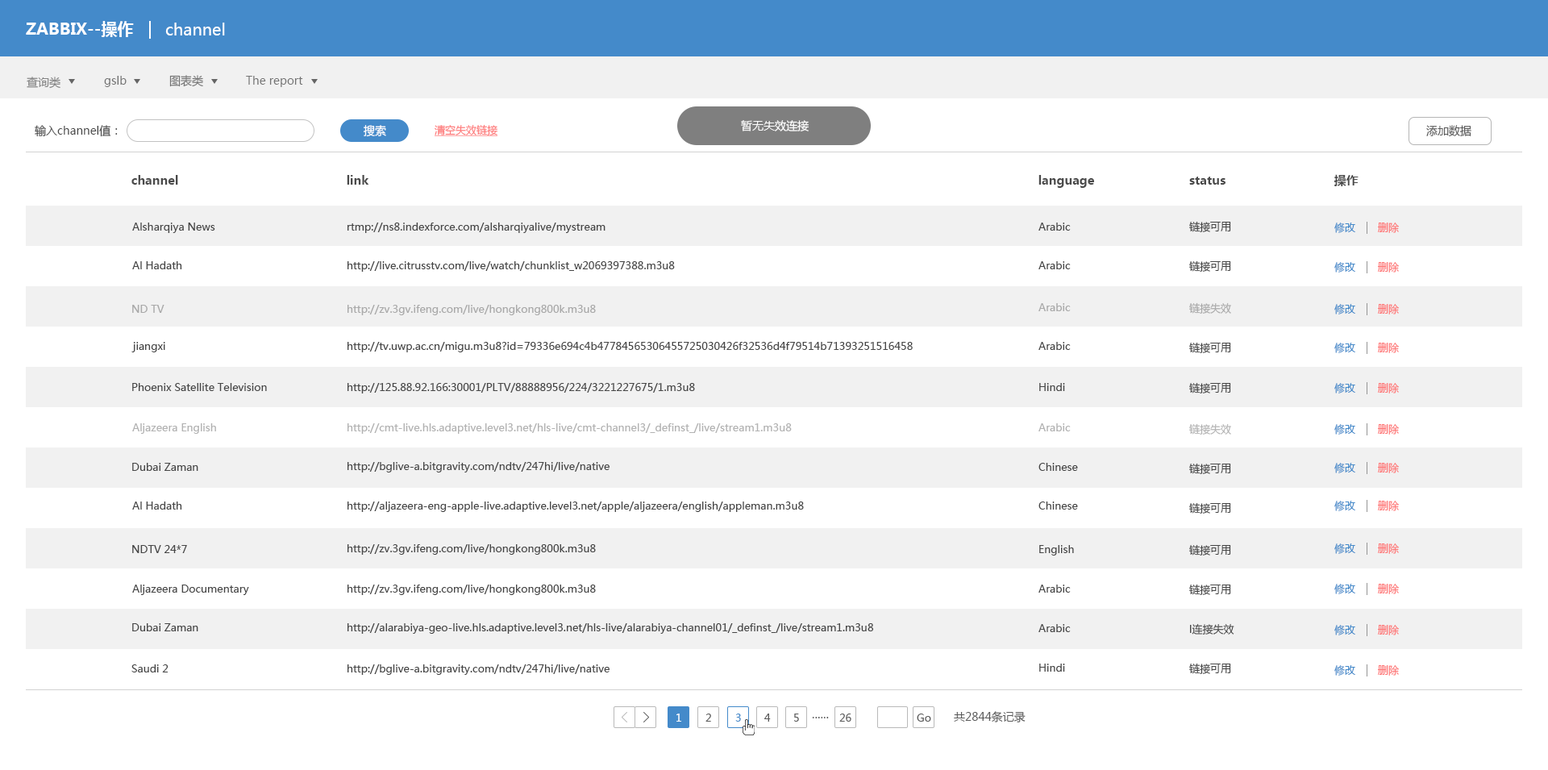
<style>
.page{position:relative;width:1548px;height:770px;background:#ffffff}
.page>*{position:absolute;margin:0}
.t1{font:16.1px "MicrosoftYaHei-Bold";color:#ffffff}
.t2{font:16.1px "MicrosoftYaHei";color:#ffffff}
.t3{font:11.3px "MicrosoftYaHei";color:#828282}
.t4{font:11.3px "MicrosoftYaHei";color:#747474}
.t5{font:11.3px "MicrosoftYaHei";color:#4a4a4a}
.t6{font:11.3px "MicrosoftYaHei";color:#ffffff}
.t7{font:10.5px "MicrosoftYaHei";color:#fe7878;text-decoration:underline}
.t8{font:11.3px "MicrosoftYaHei";color:#5c5c5c}
.t9{font:12.1px "MicrosoftYaHei-Bold";color:#4a4a4a}
.t10{font:10.5px "MicrosoftYaHei";color:#464646}
.t11{font:10.5px "MicrosoftYaHei";color:#448aca}
.t12{font:10.5px "MicrosoftYaHei";color:#fe7878}
.t13{font:10.5px "MicrosoftYaHei";color:#a9a9a9}
.t14{font:10.5px "MicrosoftYaHei";color:#b2b2b2}
.t15{font:10.5px "MicrosoftYaHei";color:#b3b3b3}
.t16{font:10.5px "MicrosoftYaHei";color:#ffffff}
.t17{font:10.5px "MicrosoftYaHei";color:#5b5b5b}
.t18{font:11.3px "MicrosoftYaHei";color:#5b5b5b}
</style>
<div class="page">
<p class="t1" style="left:26px;top:21px;width:108px;height:16px">ZABBIX--操作</p>
<p class="t2" style="left:165px;top:23px;width:60px;height:12px">channel</p>
<p class="t3" style="left:27px;top:77px;width:33px;height:12px">查询类</p>
<p class="t4" style="left:104px;top:76px;width:23px;height:11px">gslb</p>
<p class="t4" style="left:169px;top:75px;width:34px;height:12px">图表类</p>
<p class="t4" style="left:246px;top:76px;width:57px;height:11px">The report</p>
<p class="t5" style="left:35px;top:125px;width:83px;height:12px">输入channel值：</p>
<p class="t6" style="left:364px;top:125px;width:22px;height:12px">搜索</p>
<p class="t7" style="left:435px;top:124px;width:63px;height:12px">清空失效链接</p>
<p class="t6" style="left:741px;top:120px;width:68px;height:11px">暂无失效连接</p>
<p class="t8" style="left:1427px;top:125px;width:45px;height:12px">添加数据</p>
<p class="t9" style="left:131px;top:175px;width:47px;height:10px">channel</p>
<p class="t9" style="left:347px;top:175px;width:22px;height:10px">link</p>
<p class="t9" style="left:1039px;top:175px;width:55px;height:13px">language</p>
<p class="t9" style="left:1189px;top:177px;width:37px;height:8px">status</p>
<p class="t9" style="left:1335px;top:174px;width:24px;height:12px">操作</p>
<p class="t10" style="left:1189px;top:221px;width:42px;height:11px">链接可用</p>
<p class="t10" style="left:132px;top:223px;width:83px;height:10px">Alsharqiya News</p>
<p class="t10" style="left:348px;top:223px;width:258px;height:10px">rtmp://ns8.indexforce.com/alsharqiyalive/mystream</p>
<p class="t10" style="left:1039px;top:223px;width:32px;height:8px">Arabic</p>
<p class="t11" style="left:1335px;top:223px;width:21px;height:10px">修改</p>
<p class="t12" style="left:1378px;top:223px;width:21px;height:10px">删除</p>
<p class="t10" style="left:132px;top:261px;width:50px;height:8px">Al Hadath</p>
<p class="t10" style="left:348px;top:261px;width:327px;height:11px">http://live.citrusstv.com/live/watch/chunklist_w2069397388.m3u8</p>
<p class="t10" style="left:1039px;top:261px;width:32px;height:8px">Arabic</p>
<p class="t10" style="left:1189px;top:260px;width:42px;height:12px">链接可用</p>
<p class="t11" style="left:1335px;top:262px;width:21px;height:11px">修改</p>
<p class="t12" style="left:1378px;top:262px;width:21px;height:11px">删除</p>
<p class="t13" style="left:132px;top:305px;width:33px;height:8px">ND TV</p>
<p class="t13" style="left:348px;top:305px;width:248px;height:10px">http://zv.3gv.ifeng.com/live/hongkong800k.m3u8</p>
<p class="t13" style="left:1039px;top:303px;width:32px;height:8px">Arabic</p>
<p class="t13" style="left:1189px;top:302px;width:42px;height:12px">链接失效</p>
<p class="t11" style="left:1335px;top:304px;width:21px;height:11px">修改</p>
<p class="t12" style="left:1378px;top:304px;width:21px;height:11px">删除</p>
<p class="t10" style="left:131px;top:342px;width:34px;height:10px">jiangxi</p>
<p class="t10" style="left:348px;top:342px;width:565px;height:10px">http://tv.uwp.ac.cn/migu.m3u8?id=79336e694c4b47784565306455725030426f32536d4f79514b71393251516458</p>
<p class="t10" style="left:1039px;top:342px;width:32px;height:8px">Arabic</p>
<p class="t10" style="left:1189px;top:342px;width:42px;height:11px">链接可用</p>
<p class="t11" style="left:1335px;top:343px;width:21px;height:10px">修改</p>
<p class="t12" style="left:1378px;top:343px;width:21px;height:10px">删除</p>
<p class="t10" style="left:132px;top:383px;width:135px;height:8px">Phoenix Satellite Television</p>
<p class="t10" style="left:348px;top:383px;width:347px;height:11px">http://125.88.92.166:30001/PLTV/88888956/224/3221227675/1.m3u8</p>
<p class="t10" style="left:1039px;top:383px;width:26px;height:8px">Hindi</p>
<p class="t10" style="left:1189px;top:382px;width:42px;height:12px">链接可用</p>
<p class="t11" style="left:1335px;top:383px;width:21px;height:11px">修改</p>
<p class="t12" style="left:1378px;top:383px;width:21px;height:11px">删除</p>
<p class="t14" style="left:132px;top:423px;width:84px;height:11px">Aljazeera English</p>
<p class="t14" style="left:348px;top:423px;width:444px;height:11px">http://cmt-live.hls.adaptive.level3.net/hls-live/cmt-channel3/_definst_/live/stream1.m3u8</p>
<p class="t14" style="left:1039px;top:423px;width:32px;height:8px">Arabic</p>
<p class="t15" style="left:1189px;top:423px;width:42px;height:12px">链接失效</p>
<p class="t11" style="left:1335px;top:424px;width:21px;height:11px">修改</p>
<p class="t12" style="left:1378px;top:424px;width:21px;height:11px">删除</p>
<p class="t10" style="left:132px;top:463px;width:66px;height:8px">Dubai Zaman</p>
<p class="t10" style="left:348px;top:462px;width:262px;height:11px">http://bglive-a.bitgravity.com/ndtv/247hi/live/native</p>
<p class="t10" style="left:1039px;top:463px;width:39px;height:8px">Chinese</p>
<p class="t10" style="left:1189px;top:463px;width:42px;height:11px">链接可用</p>
<p class="t11" style="left:1335px;top:463px;width:21px;height:10px">修改</p>
<p class="t12" style="left:1378px;top:463px;width:21px;height:10px">删除</p>
<p class="t10" style="left:132px;top:502px;width:50px;height:8px">Al Hadath</p>
<p class="t10" style="left:348px;top:502px;width:456px;height:10px">http://aljazeera-eng-apple-live.adaptive.level3.net/apple/aljazeera/english/appleman.m3u8</p>
<p class="t10" style="left:1039px;top:502px;width:39px;height:8px">Chinese</p>
<p class="t10" style="left:1189px;top:502px;width:42px;height:12px">链接可用</p>
<p class="t11" style="left:1335px;top:501px;width:21px;height:10px">修改</p>
<p class="t12" style="left:1378px;top:501px;width:21px;height:10px">删除</p>
<p class="t10" style="left:132px;top:545px;width:55px;height:8px">NDTV 24*7</p>
<p class="t10" style="left:348px;top:544px;width:248px;height:11px">http://zv.3gv.ifeng.com/live/hongkong800k.m3u8</p>
<p class="t10" style="left:1039px;top:545px;width:35px;height:11px">English</p>
<p class="t10" style="left:1189px;top:544px;width:42px;height:12px">链接可用</p>
<p class="t11" style="left:1335px;top:544px;width:21px;height:10px">修改</p>
<p class="t12" style="left:1378px;top:544px;width:21px;height:10px">删除</p>
<p class="t10" style="left:132px;top:585px;width:117px;height:10px">Aljazeera Documentary</p>
<p class="t10" style="left:348px;top:585px;width:248px;height:10px">http://zv.3gv.ifeng.com/live/hongkong800k.m3u8</p>
<p class="t10" style="left:1039px;top:585px;width:32px;height:8px">Arabic</p>
<p class="t10" style="left:1189px;top:584px;width:42px;height:11px">链接可用</p>
<p class="t11" style="left:1335px;top:584px;width:21px;height:10px">修改</p>
<p class="t12" style="left:1378px;top:584px;width:21px;height:10px">删除</p>
<p class="t10" style="left:132px;top:623px;width:66px;height:8px">Dubai Zaman</p>
<p class="t10" style="left:348px;top:623px;width:526px;height:11px">http://alarabiya-geo-live.hls.adaptive.level3.net/hls-live/alarabiya-channel01/_definst_/live/stream1.m3u8</p>
<p class="t10" style="left:1039px;top:624px;width:32px;height:8px">Arabic</p>
<p class="t10" style="left:1190px;top:623px;width:45px;height:12px">l连接失效</p>
<p class="t11" style="left:1335px;top:625px;width:21px;height:10px">修改</p>
<p class="t12" style="left:1378px;top:625px;width:21px;height:10px">删除</p>
<p class="t10" style="left:131px;top:664px;width:38px;height:9px">Saudi 2</p>
<p class="t10" style="left:348px;top:664px;width:262px;height:11px">http://bglive-a.bitgravity.com/ndtv/247hi/live/native</p>
<p class="t10" style="left:1039px;top:664px;width:26px;height:8px">Hindi</p>
<p class="t10" style="left:1189px;top:663px;width:42px;height:11px">链接可用</p>
<p class="t11" style="left:1335px;top:665px;width:21px;height:11px">修改</p>
<p class="t12" style="left:1378px;top:665px;width:21px;height:11px">删除</p>
<p class="t16" style="left:677px;top:714px;width:4px;height:8px">1</p>
<p class="t17" style="left:706px;top:714px;width:5px;height:8px">2</p>
<p class="t11" style="left:735px;top:714px;width:6px;height:8px">3</p>
<p class="t17" style="left:764px;top:714px;width:7px;height:8px">4</p>
<p class="t17" style="left:794px;top:714px;width:5px;height:8px">5</p>
<p class="t17" style="left:839px;top:714px;width:13px;height:8px">26</p>
<p class="t17" style="left:917px;top:714px;width:14px;height:8px">Go</p>
<p class="t18" style="left:954px;top:711px;width:72px;height:12px">共2844条记录</p>
<p class="t17" style="left:812px;top:717px;width:17px;height:2px">……</p>
</div>
